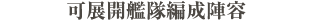
<style>
.page{position:relative;width:312px;height:21px;background:#ffffff}
.page>*{position:absolute;margin:0}
.t1{font:20px "RyuminPr6N-ExBold";color:#4c4843}
</style>
<div class="page">
<p class="t1" style="left:67px;top:0px;width:179px;height:20px">可展開艦隊編成陣容</p>
</div>
